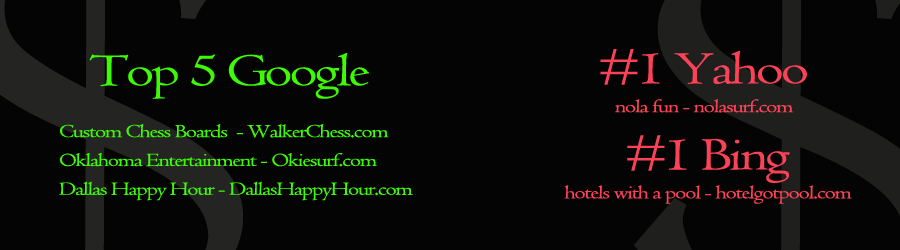
<style>
.page{position:relative;width:900px;height:250px;background:#050404}
.page>*{position:absolute;margin:0}
.t1{font:48px "Centaur";letter-spacing:-0.05em;color:#3dfb03;scale:1.25 1}
.t2{font:19.2px "Centaur";letter-spacing:-0.05em;color:#fd4258;scale:1.25 1}
.t3{font:48px "Centaur";letter-spacing:-0.05em;color:#fd4258;scale:1.25 1}
.t4{font:19.2px "Centaur";letter-spacing:-0.05em;color:#3dfb03;scale:1.25 1}
</style>
<div class="page">
<p class="t1" style="left:89px;top:53px;width:280px;height:46px">Top 5 Google</p>
<p class="t2" style="left:600px;top:49px;width:207px;height:64px;text-align:center"><span class="t3">#1 Yahoo<br></span>nola fun - nolasurf.com</p>
<p class="t4" style="left:59px;top:124px;width:354px;height:77px">Custom Chess Boards  - WalkerChess.com<br>Oklahoma Entertainment - Okiesurf.com<br>Dallas Happy Hour - DallasHappyHour.com</p>
<p class="t2" style="left:564px;top:135px;width:288px;height:69px;text-align:center"><span class="t3">#1 Bing<br></span>hotels with a pool - hotelgotpool.com</p>
</div>
